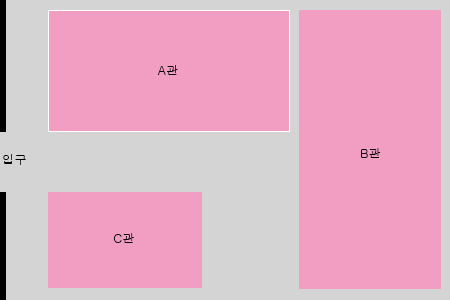
<style>
.page{position:relative;width:450px;height:300px;background:#f19ec2}
.page>*{position:absolute;margin:0}
.t1{font:12.5px "Gulim";color:#000000}
</style>
<div class="page">
<p class="t1" style="left:157px;top:65px;width:21px;height:10px">A관</p>
<p class="t1" style="left:361px;top:148px;width:20px;height:10px">B관</p>
<p class="t1" style="left:3px;top:154px;width:23px;height:11px">입구</p>
<p class="t1" style="left:113px;top:233px;width:21px;height:10px">C관</p>
</div>
